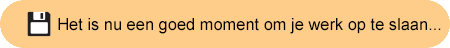
<style>
.page{position:relative;width:450px;height:48px;background:#fecd8a}
.page>*{position:absolute;margin:0}
.t1{font:16.4px "ArialMT";color:#000000}
</style>
<div class="page">
<p class="t1" style="left:58px;top:18px;width:383px;height:16px">Het is nu een goed moment om je werk op te slaan...</p>
</div>
